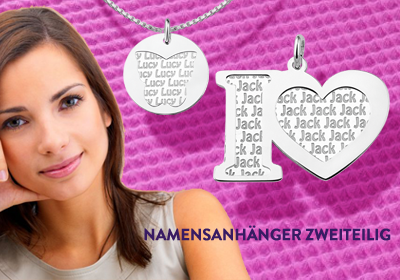
<style>
.page{position:relative;width:400px;height:280px}
.page>*{position:absolute;margin:0}
.t1{font:16px "BrandonGrotesque-Bold";letter-spacing:-0.02em;color:#381b63;font-weight:bold}
</style>
<div class="page">
<p class="t1" style="left:144px;top:225px;width:247px;height:16px">NAMENSANHÄNGER ZWEITEILIG</p>
</div>
